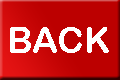
<style>
.page{position:relative;width:120px;height:80px;background:#bc0000}
.page>*{position:absolute;margin:0}
.t1{font:36px "ArialRoundedMTBold";color:#ffffff}
</style>
<div class="page">
<p class="t1" style="left:10px;top:27px;width:99px;height:26px">BACK</p>
</div>
